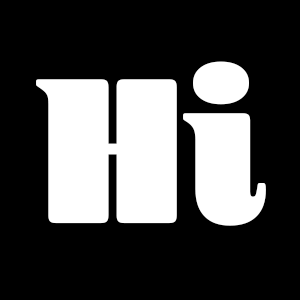
<style>
.page{position:relative;width:300px;height:300px;background:#000000}
.page>*{position:absolute;margin:0}
.t1{font:216px "Blenny-Black";color:#ffffff}
</style>
<div class="page">
<p class="t1" style="left:36px;top:61px;width:230px;height:165px">Hi</p>
</div>
